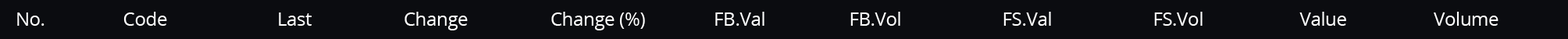
<style>
.page{position:relative;width:1568px;height:39px;background:#0b0c10}
.page>*{position:absolute;margin:0}
.t1{font:18.7px "OpenSans";letter-spacing:-0.015em;color:#ffffff}
</style>
<div class="page">
<p class="t1" style="left:17px;top:12px;width:1482px;height:18px">No.                 Code                        Last                    Change                  Change (%)               FB.Val            FB.Vol                      FS.Val                      FS.Vol                     Value                   Volume</p>
</div>
